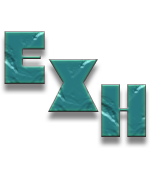
<style>
.page{position:relative;width:150px;height:175px;background:#ffffff}
.page>*{position:absolute;margin:0}
.t1{font:75.4px "Flegrei-Regular";color:#297980}
</style>
<div class="page">
<p class="t1" style="left:4px;top:31px;width:41px;height:53px">E</p>
<p class="t1" style="left:48px;top:59px;width:51px;height:53px">X</p>
<p class="t1" style="left:101px;top:84px;width:45px;height:53px">H</p>
</div>
